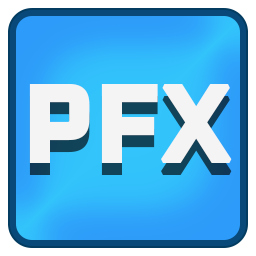
<style>
.page{position:relative;width:256px;height:256px}
.page>*{position:absolute;margin:0}
.t1{font:115.1px "Oxanium-ExtraBold";letter-spacing:-0.02em;color:#f4f4f4}
</style>
<div class="page">
<p class="t1" style="left:29px;top:84px;width:203px;height:79px">PFX</p>
</div>
